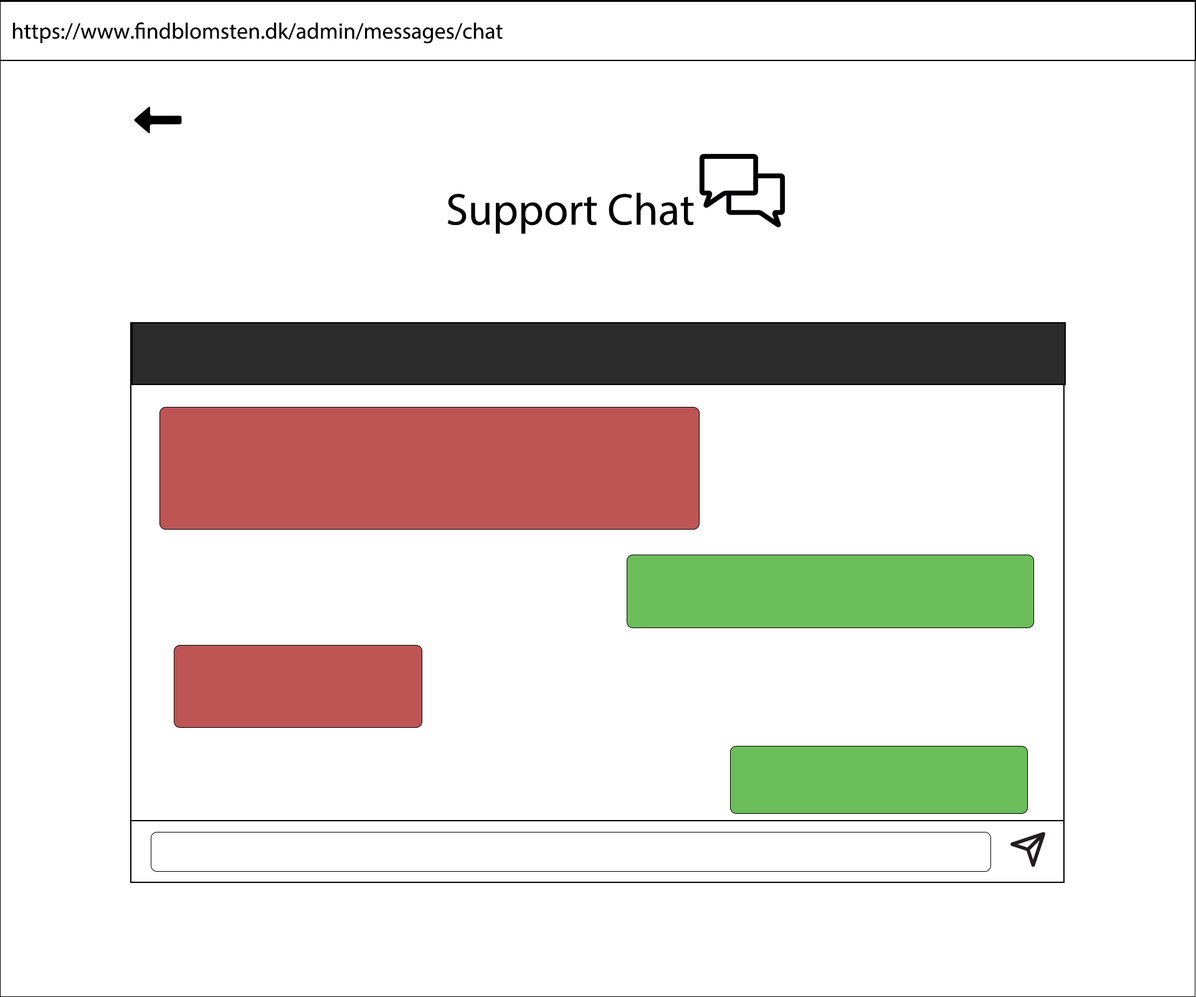
<style>
.page{position:relative;width:1196px;height:997px;background:#ffffff}
.page>*{position:absolute;margin:0}
.t1{font:22.4px "MyriadPro-Regular";color:#000000}
.t2{font:44.9px "MyriadPro-Regular";color:#000000}
</style>
<div class="page">
<p class="t1" style="left:12px;top:22px;width:491px;height:22px">https://www.findblomsten.dk/admin/messages/chat</p>
<p class="t2" style="left:447px;top:193px;width:247px;height:41px">Support Chat</p>
</div>
